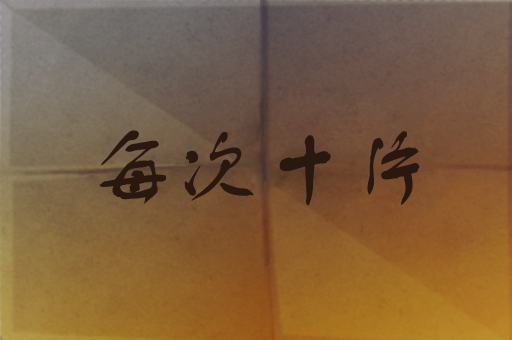
<style>
.page{position:relative;width:512px;height:340px}
.page>*{position:absolute;margin:0}
.t1{font:86.7px "FZSTK--GBK1-0";color:#281810}
</style>
<div class="page">
<p class="t1" style="left:99px;top:130px;width:321px;height:76px">每次十片</p>
</div>
